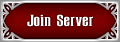
<style>
.page{position:relative;width:120px;height:42px}
.page>*{position:absolute;margin:0}
.t1{font:16px "Ravenscroft";color:#ffffff;scale:1.8 1}
</style>
<div class="page">
<p class="t1" style="left:27px;top:14px;width:66px;height:13px">Join Server</p>
</div>
